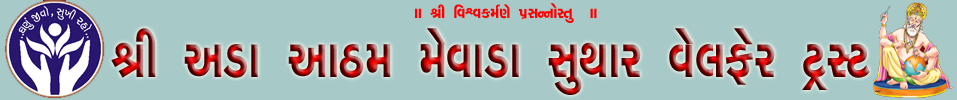
<style>
.page{position:relative;width:957px;height:100px;background:#a7c9c8}
.page>*{position:absolute;margin:0}
.t1{font:20px "GujratiLys-050Thin";color:#ff0000}
.t2{font:71.3px "GujratiLys-050Thin";scale:0.89 1}
</style>
<div class="page">
<p class="t1" style="left:415px;top:3px;width:182px;height:20px">FF zL lJ`JSD"6[ 5|;gGM:T]  FF</p>
<p class="t2" style="left:111px;top:28px;width:759px;height:67px">zL V0F VF9D D[JF0F ;]YFZ J[,O[Z 8=:8</p>
</div>
